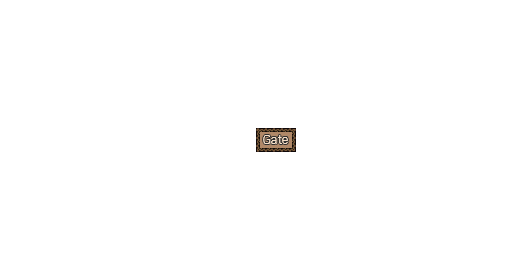
<style>
.page{position:relative;width:512px;height:256px;background:#ffffff}
.page>*{position:absolute;margin:0}
.t1{font:13.3px "FranklinGothic-Book";color:#f8e0c8}
</style>
<div class="page">
<p class="t1" style="left:263px;top:135px;width:25px;height:9px">Gate</p>
</div>
